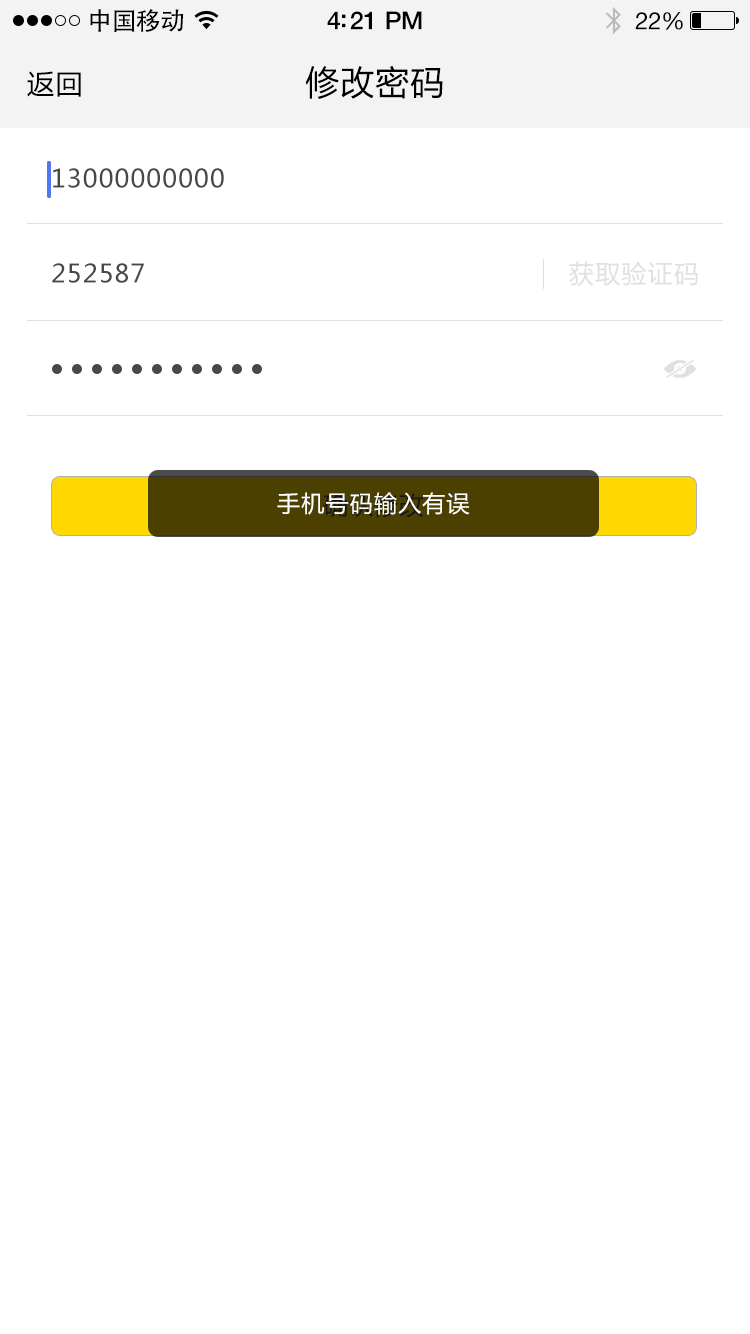
<style>
.page{position:relative;width:750px;height:1334px;background:#ffffff}
.page>*{position:absolute;margin:0}
.t1{font:25px "AdobeHeitiStd-Regular";letter-spacing:-0.025em;color:#000000}
.t2{font:25px "HelveticaNeue-Medium";letter-spacing:-0.02em;color:#000000}
.t3{font:24px "HelveticaNeue";letter-spacing:-0.02em;color:#000000}
.t4{font:34px "MicrosoftYaHei";letter-spacing:0.03em;color:#000000}
.t5{font:27px "MicrosoftYaHei";letter-spacing:0.05em;color:#000000}
.t6{font:25px "MicrosoftYaHei";letter-spacing:0.05em;color:#484848}
.t7{font:25px "MicrosoftYaHei";letter-spacing:0.05em;color:#e0e0e0}
.t8{font:23px "MicrosoftYaHei";letter-spacing:0.05em;color:#ffffff}
</style>
<div class="page">
<p class="t1" style="left:90px;top:9px;width:94px;height:23px">中国移动</p>
<p class="t2" style="left:327px;top:11px;width:95px;height:19px">4:21 PM</p>
<p class="t3" style="left:635px;top:12px;width:48px;height:18px">22%</p>
<p class="t4" style="left:305px;top:65px;width:138px;height:34px">修改密码</p>
<p class="t5" style="left:27px;top:71px;width:54px;height:26px">返回</p>
<p class="t6" style="left:53px;top:168px;width:171px;height:20px">13000000000</p>
<p class="t6" style="left:52px;top:263px;width:92px;height:20px">252587</p>
<p class="t7" style="left:569px;top:261px;width:129px;height:25px">获取验证码</p>
<p class="t8" style="left:277px;top:492px;width:193px;height:23px">手机号码输入有误</p>
</div>
